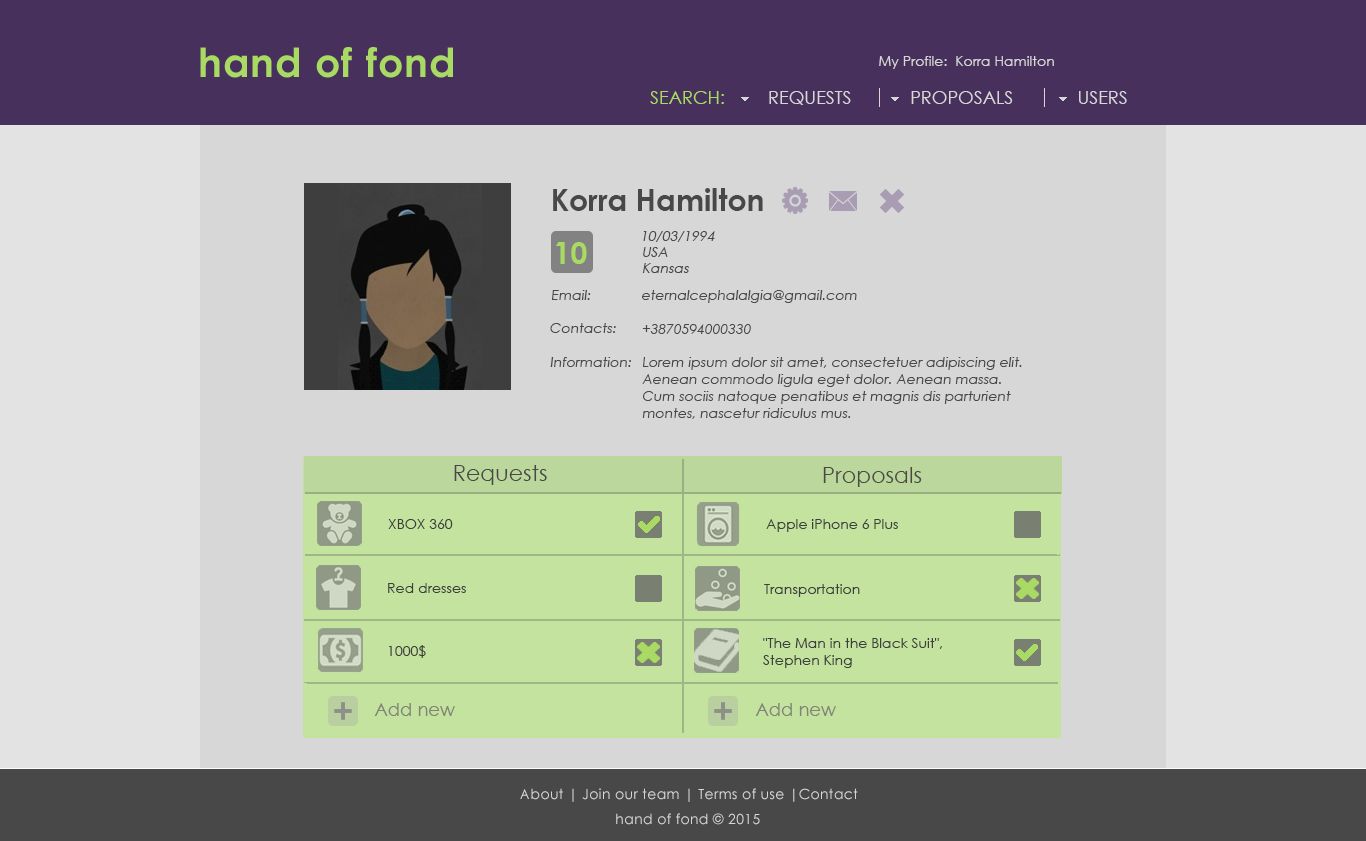
<style>
.page{position:relative;width:1366px;height:841px;background:#d7d7d7}
.page>*{position:absolute;margin:0}
.t1{font:14px "CenturyGothic";color:#d7d7d7}
.t2{font:18px "CenturyGothic";color:#a9da63}
.t3{font:18px "CenturyGothic";color:#d7d7d7}
.t4{font:30px "CenturyGothic-Bold";color:#484848}
.t5{font:22px "CenturyGothic";color:#484848}
.t6{font:14px "CenturyGothic";color:#484848;font-style:italic}
.t7{font:14px "CenturyGothic-Italic";color:#484848}
.t8{font:14px "CenturyGothic";color:#3e3e3e}
.t9{font:18px "CenturyGothic";color:#7f8378}
.t10{font:14px "CenturyGothic";letter-spacing:0.025em;color:#d7d7d7}
</style>
<div class="page">
<p class="t1" style="left:879px;top:56px;width:68px;height:13px">My Profile:</p>
<p class="t1" style="left:956px;top:56px;width:98px;height:10px">Korra Hamilton</p>
<p class="t2" style="left:650px;top:91px;width:74px;height:13px">SEARCH:</p>
<p class="t3" style="left:769px;top:91px;width:82px;height:14px">REQUESTS</p>
<p class="t3" style="left:911px;top:91px;width:102px;height:13px">PROPOSALS</p>
<p class="t3" style="left:1079px;top:91px;width:48px;height:13px">USERS</p>
<p class="t4" style="left:553px;top:188px;width:210px;height:23px"><span class="t5">  </span>Korra Hamilton</p>
<p class="t6" style="left:643px;top:231px;width:72px;height:11px">10/03/1994</p>
<p class="t6" style="left:643px;top:247px;width:25px;height:10px">USA</p>
<p class="t6" style="left:642px;top:263px;width:48px;height:10px">Kansas</p>
<p class="t7" style="left:551px;top:290px;width:40px;height:10px">Email:</p>
<p class="t7" style="left:642px;top:290px;width:215px;height:13px">eternalcephalalgia@gmail.com</p>
<p class="t7" style="left:550px;top:323px;width:66px;height:10px">Contacts:</p>
<p class="t7" style="left:642px;top:324px;width:109px;height:10px">+3870594000330</p>
<p class="t7" style="left:550px;top:357px;width:81px;height:10px">Information:</p>
<p class="t7" style="left:642px;top:357px;width:380px;height:62px">Lorem ipsum dolor sit amet, consectetuer adipiscing elit. <br>Aenean commodo ligula eget dolor. Aenean massa. <br>Cum sociis natoque penatibus et magnis dis parturient <br>montes, nascetur ridiculus mus.</p>
<p class="t5" style="left:454px;top:465px;width:93px;height:20px">Requests</p>
<p class="t5" style="left:823px;top:467px;width:99px;height:20px">Proposals</p>
<p class="t8" style="left:388px;top:519px;width:65px;height:10px">XBOX 360</p>
<p class="t8" style="left:766px;top:519px;width:132px;height:13px">Apple iPhone 6 Plus</p>
<p class="t8" style="left:388px;top:583px;width:78px;height:10px">Red dresses</p>
<p class="t8" style="left:764px;top:584px;width:96px;height:13px">Transportation</p>
<p class="t8" style="left:763px;top:638px;width:179px;height:30px">"The Man in the Black Suit", <br>Stephen King</p>
<p class="t8" style="left:389px;top:645px;width:37px;height:13px">1000$</p>
<p class="t9" style="left:374px;top:703px;width:81px;height:13px">Add new</p>
<p class="t9" style="left:755px;top:703px;width:81px;height:13px">Add new</p>
<p class="t10" style="left:520px;top:788px;width:338px;height:14px">About | Join our team | Terms of use |Contact</p>
<p class="t10" style="left:616px;top:813px;width:144px;height:12px">hand of fond © 2015</p>
</div>
